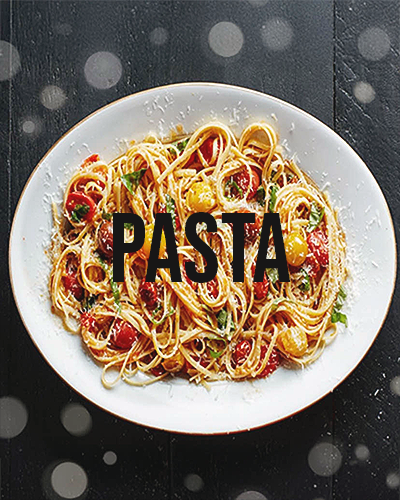
<style>
.page{position:relative;width:400px;height:500px}
.page>*{position:absolute;margin:0}
.t1{font:99px "BebasNeue-Regular";color:#171616}
</style>
<div class="page">
<p class="t1" style="left:113px;top:212px;width:178px;height:71px">PASTA</p>
</div>
